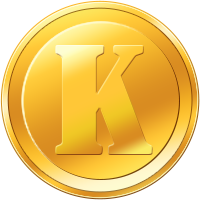
<style>
.page{position:relative;width:200px;height:200px;background:#ffffff}
.page>*{position:absolute;margin:0}
.t1{font:140.2px "BernardMT-Condensed";scale:1.37 1}
</style>
<div class="page">
<p class="t1" style="left:55px;top:45px;width:98px;height:110px">K</p>
</div>
